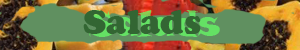
<style>
.page{position:relative;width:300px;height:50px;background:#609060}
.page>*{position:absolute;margin:0}
.t1{font:36px "CooperBlack";color:#336633}
.t2{font:36px "SnapITC-Regular"}
</style>
<div class="page">
<p class="t1" style="left:83px;top:10px;width:118px;height:24px">Salads</p>
<p class="t2" style="left:86px;top:10px;width:134px;height:27px">Salads</p>
</div>
